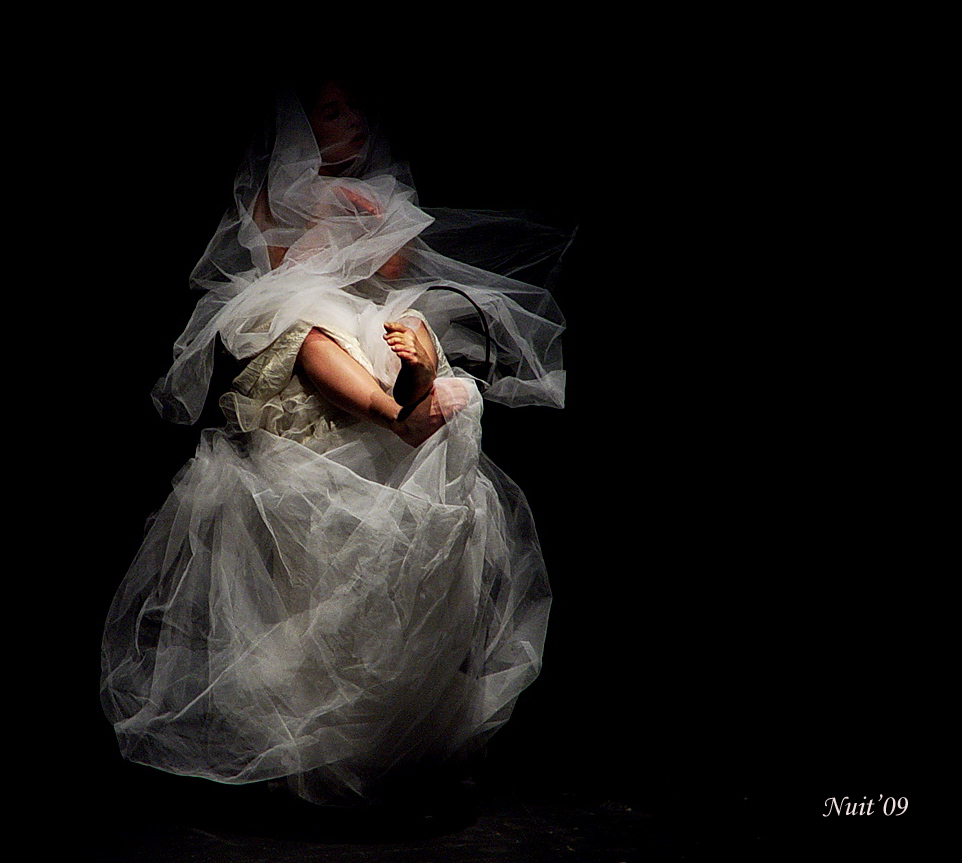
<style>
.page{position:relative;width:962px;height:863px;background:#000000}
.page>*{position:absolute;margin:0}
.t1{font:30px "MonotypeCorsiva";color:#efdfdf}
.t2{font:30px "MonotypeCorsiva";color:#000000}
</style>
<div class="page">
<p class="t1" style="left:754px;top:794px;width:154px;height:23px"><span class="t2">Nnuio</span>Nuit’09</p>
</div>
